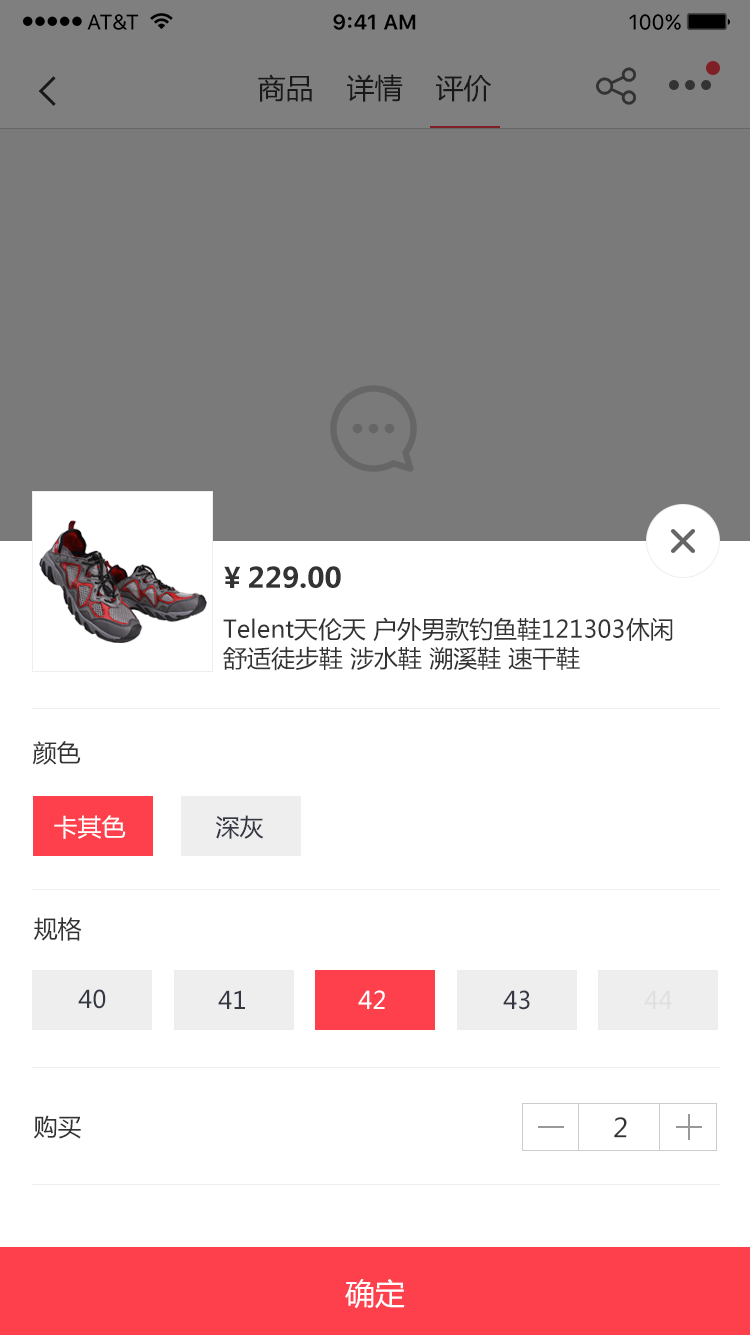
<style>
.page{position:relative;width:750px;height:1335px;background:#ffffff}
.page>*{position:absolute;margin:0}
.t1{font:28px "MicrosoftYaHei";color:#191919}
.t2{font:28px "MicrosoftYaHei-Bold";color:#333333}
.t3{font:24px "MicrosoftYaHei";color:#333333}
.t4{font:24px "MicrosoftYaHei";color:#ffffff}
.t5{font:24px "MicrosoftYaHei";color:#343843}
.t6{font:24px "MicrosoftYaHei";color:#e0e0e1}
.t7{font:26px "MicrosoftYaHei";letter-spacing:0.06em;color:#333333}
.t8{font:30px "MicrosoftYaHei";color:#ffffff}
</style>
<div class="page">
<p class="t1" style="left:258px;top:74px;width:233px;height:28px">商品    详情    评价</p>
<p class="t2" style="left:224px;top:566px;width:17px;height:22px">¥</p>
<p class="t2" style="left:249px;top:566px;width:92px;height:22px">229.00</p>
<p class="t3" style="left:223px;top:617px;width:450px;height:54px">Telent天伦天 户外男款钓鱼鞋121303休闲舒适徒步鞋 涉水鞋 溯溪鞋 速干鞋</p>
<p class="t3" style="left:32px;top:741px;width:49px;height:24px">颜色</p>
<p class="t4" style="left:54px;top:815px;width:72px;height:24px">卡其色</p>
<p class="t5" style="left:216px;top:815px;width:48px;height:24px">深灰</p>
<p class="t3" style="left:34px;top:917px;width:48px;height:24px">规格</p>
<p class="t5" style="left:78px;top:989px;width:28px;height:20px">40</p>
<p class="t5" style="left:218px;top:990px;width:27px;height:19px">41</p>
<p class="t4" style="left:358px;top:990px;width:27px;height:19px">42</p>
<p class="t5" style="left:503px;top:990px;width:27px;height:20px">43</p>
<p class="t6" style="left:644px;top:990px;width:28px;height:19px">44</p>
<p class="t3" style="left:33px;top:1115px;width:48px;height:24px">购买</p>
<p class="t7" style="left:614px;top:1117px;width:13px;height:21px">2</p>
<p class="t8" style="left:345px;top:1279px;width:60px;height:30px">确定</p>
</div>
